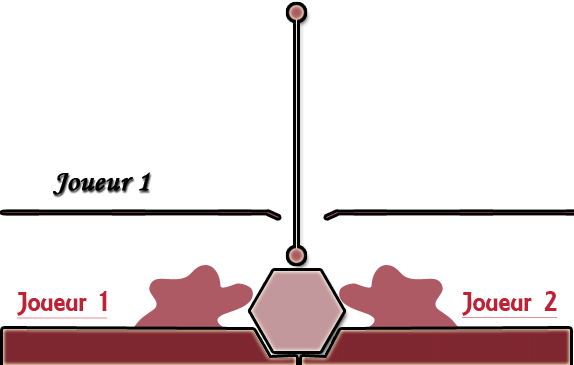
<style>
.page{position:relative;width:574px;height:365px;background:#ffffff}
.page>*{position:absolute;margin:0}
.t1{font:30px "MonotypeCorsiva";color:#010101;font-weight:bold}
.t2{font:30px "ARESSENCE";color:#c02335;text-decoration:underline}
</style>
<div class="page">
<p class="t1" style="left:53px;top:172px;width:97px;height:23px">Joueur 1</p>
<p class="t2" style="left:17px;top:291px;width:91px;height:28px">Joueur 1</p>
<p class="t2" style="left:462px;top:291px;width:96px;height:27px">Joueur 2</p>
</div>
